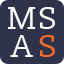
<style>
.page{position:relative;width:64px;height:64px;background:#2e334a}
.page>*{position:absolute;margin:0}
.t1{font:32px/28px "Slabo13px";letter-spacing:0.075em;color:#f9f9f9}
.t2{font:32px/28px "Slabo13px";letter-spacing:0.199em;color:#f9f9f9}
.t3{font:32px/28px "Slabo13px";letter-spacing:0.199em;color:#f76b2a}
</style>
<div class="page">
<p class="t1" style="left:8px;top:7px;width:47px;height:50px;text-align:right">MS<br><span class="t2">A</span><span class="t3">S</span></p>
</div>
